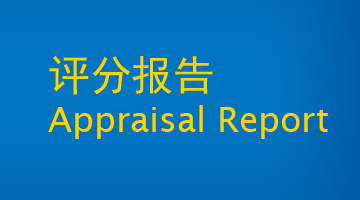
<style>
.page{position:relative;width:360px;height:200px;background:#0074c1}
.page>*{position:absolute;margin:0}
.t1{font:34.7px "LucidaSans";color:#ffd200}
.t2{font:41.7px "SimHei";color:#ffd200}
</style>
<div class="page">
<p class="t1" style="left:48px;top:56px;width:280px;height:83px"><span class="t2">评分报告<br></span>Appraisal Report</p>
</div>
